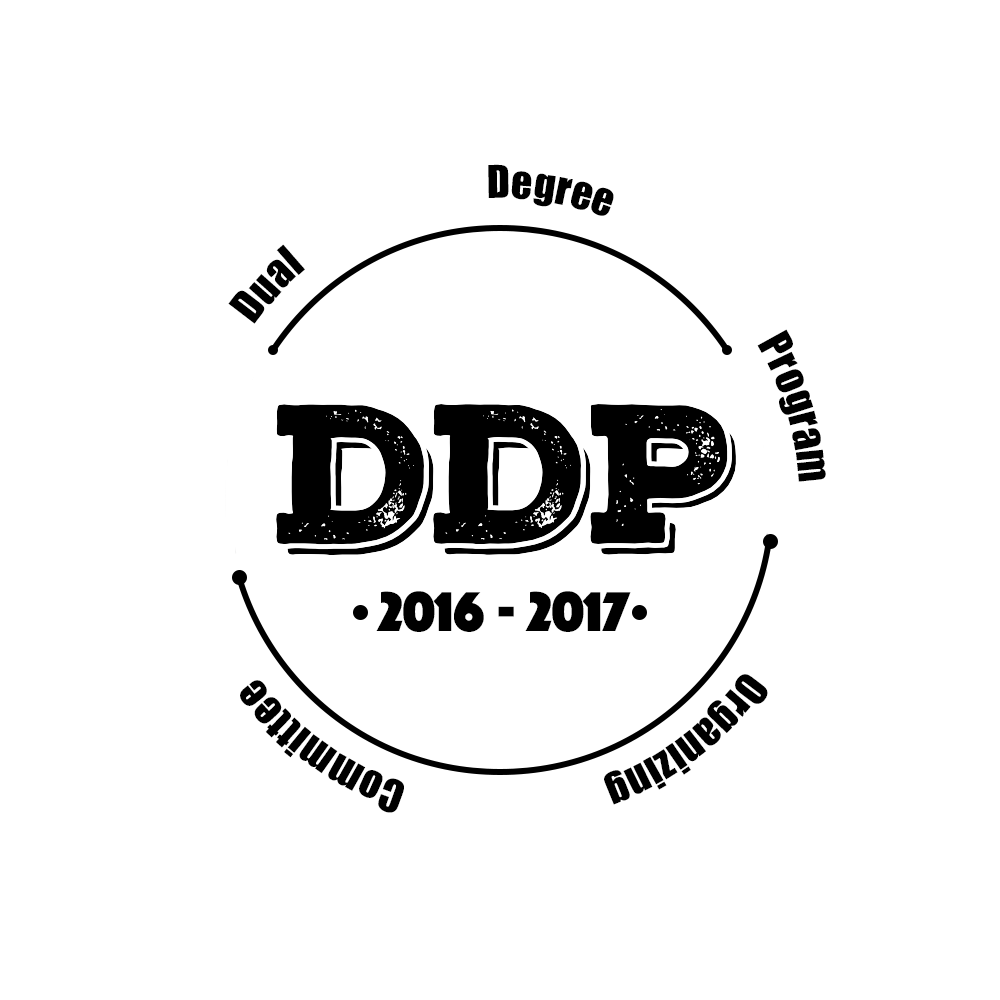
<style>
.page{position:relative;width:1000px;height:1000px;background:#ffffff}
.page>*{position:absolute;margin:0}
.t1{font:41.7px "Impact";color:#000000}
.t2{font:41.7px "LiGothicMed";color:#000000}
.t3{font:58.3px "Phosphate-Solid";color:#000000}
</style>
<div class="page">
<p class="t1" style="left:228px;top:164px;width:598px;height:649px;text-align:justify"><span class="t2"> </span>Dual Degree Program Organizing Committee</p>
<p class="t3" style="left:376px;top:591px;width:255px;height:41px">2016 - 2017</p>
</div>
